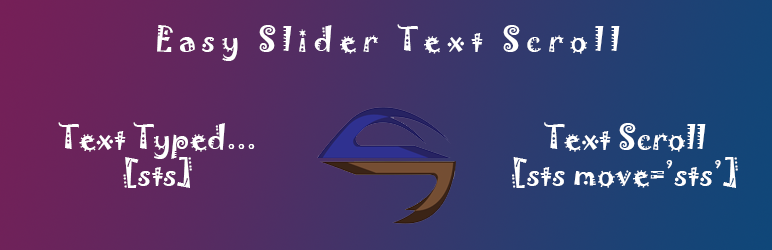
<style>
.page{position:relative;width:772px;height:250px}
.page>*{position:absolute;margin:0}
.t1{font:30px "Jokerman-Regular";letter-spacing:0.2em;color:#ffffff}
.t2{font:30px "Jokerman-Regular";color:#ffffff}
</style>
<div class="page">
<p class="t1" style="left:157px;top:24px;width:463px;height:37px">Easy Slider Text Scroll</p>
<p class="t2" style="left:58px;top:122px;width:197px;height:66px;text-align:center">Text Typed...<br>[sts]</p>
<p class="t2" style="left:512px;top:122px;width:226px;height:66px;text-align:center">Text Scroll<br>[sts move=’sts’]</p>
</div>
